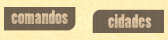
<style>
.page{position:relative;width:168px;height:40px}
.page>*{position:absolute;margin:0}
.t1{font:18px "PoplarStd";color:#d0b798}
.t2{font:18px "PoplarStd";color:#d8bd9c}
</style>
<div class="page">
<p class="t1" style="left:11px;top:10px;width:57px;height:14px">comandos</p>
<p class="t2" style="left:108px;top:14px;width:44px;height:14px">cidades</p>
</div>
